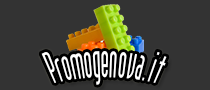
<style>
.page{position:relative;width:210px;height:90px;background:#333333}
.page>*{position:absolute;margin:0}
.t1{font:21.5px "Institution";color:#ffffff;scale:1.15 1}
</style>
<div class="page">
<p class="t1" style="left:41px;top:51px;width:126px;height:34px">Promogenova.it</p>
</div>
